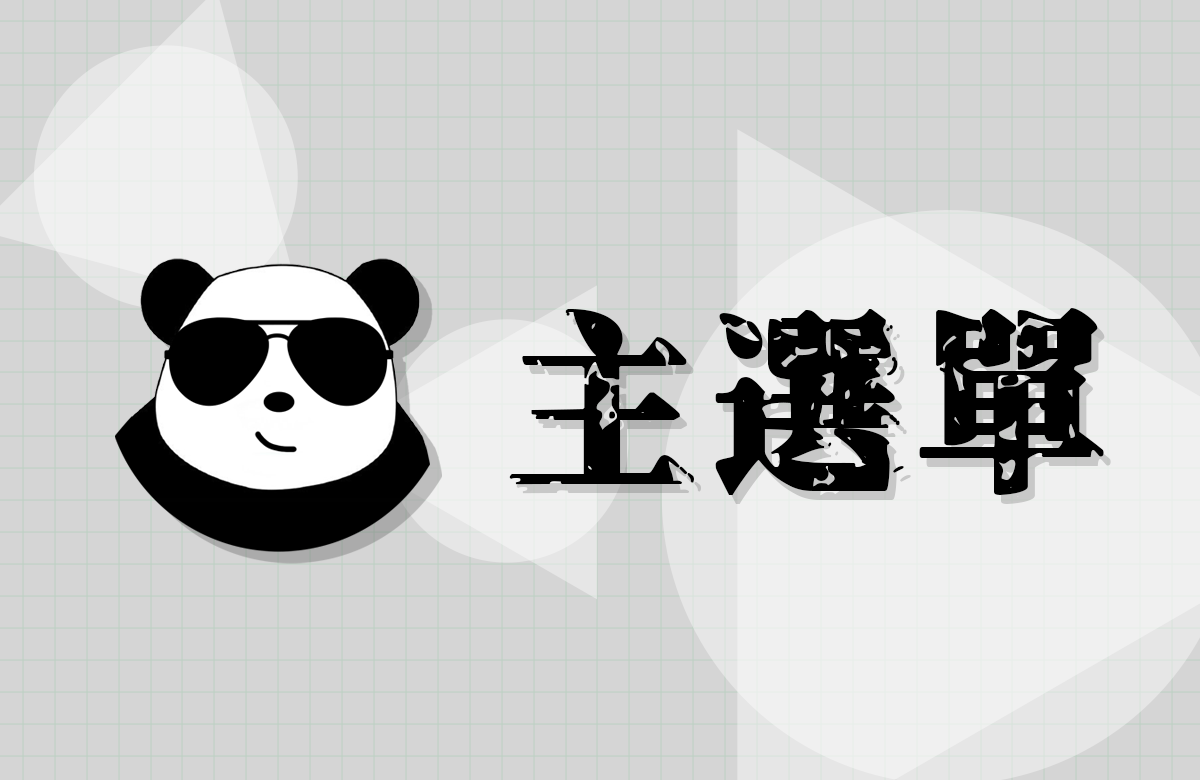
<style>
.page{position:relative;width:1200px;height:780px;background:#d5d5d5}
.page>*{position:absolute;margin:0}
.t1{font:192.7px "Genkaimincho";letter-spacing:0.05em;color:#000000;font-weight:bold}
.t2{font:192.7px "Genkaimincho";letter-spacing:0.05em;font-weight:bold}
</style>
<div class="page">
<p class="t1" style="left:509px;top:308px;width:595px;height:187px">主選單</p>
<p class="t2" style="left:516px;top:317px;width:595px;height:187px">主選單</p>
</div>
